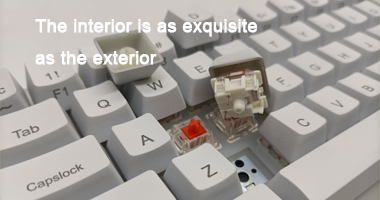
<style>
.page{position:relative;width:380px;height:200px}
.page>*{position:absolute;margin:0}
.t1{font:18px "ArialMT";color:#ffffff;font-weight:bold}
</style>
<div class="page">
<p class="t1" style="left:35px;top:19px;width:223px;height:46px">The interior is as exquisite <br>as the exterior</p>
</div>
